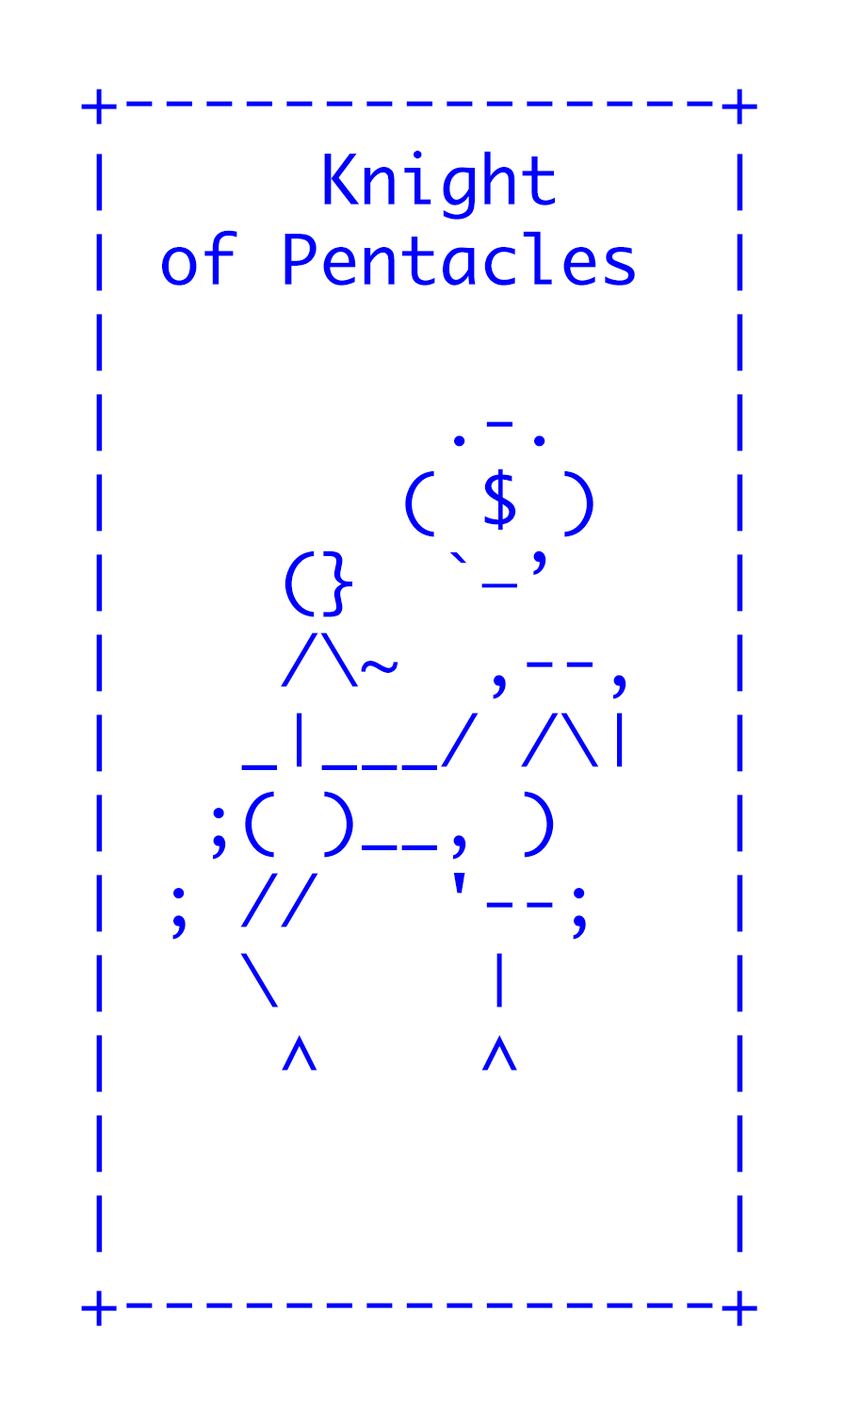
<style>
.page{position:relative;width:845px;height:1411px;background:#ffffff}
.page>*{position:absolute;margin:0}
.t1{font:66.7px "Monaco";color:#0000ff}
</style>
<div class="page">
<p class="t1" style="left:81px;top:89px;width:677px;height:1237px">+---------------+<br>│     Knight    │<br>│ of Pentacles  │<br>│               │<br>│        .-.    │<br>│       ( $ )   │<br>│    (}  `—’    │<br>│    /\~  ,--,  │ <br>│   _|___/ /\|  │ <br>│  ;( )__, )    │ <br>│ ; //   '--;   │ <br>│   \     |     │ <br>│    ^    ^     │ <br>│               │<br>│               │<br>+---------------+</p>
</div>
